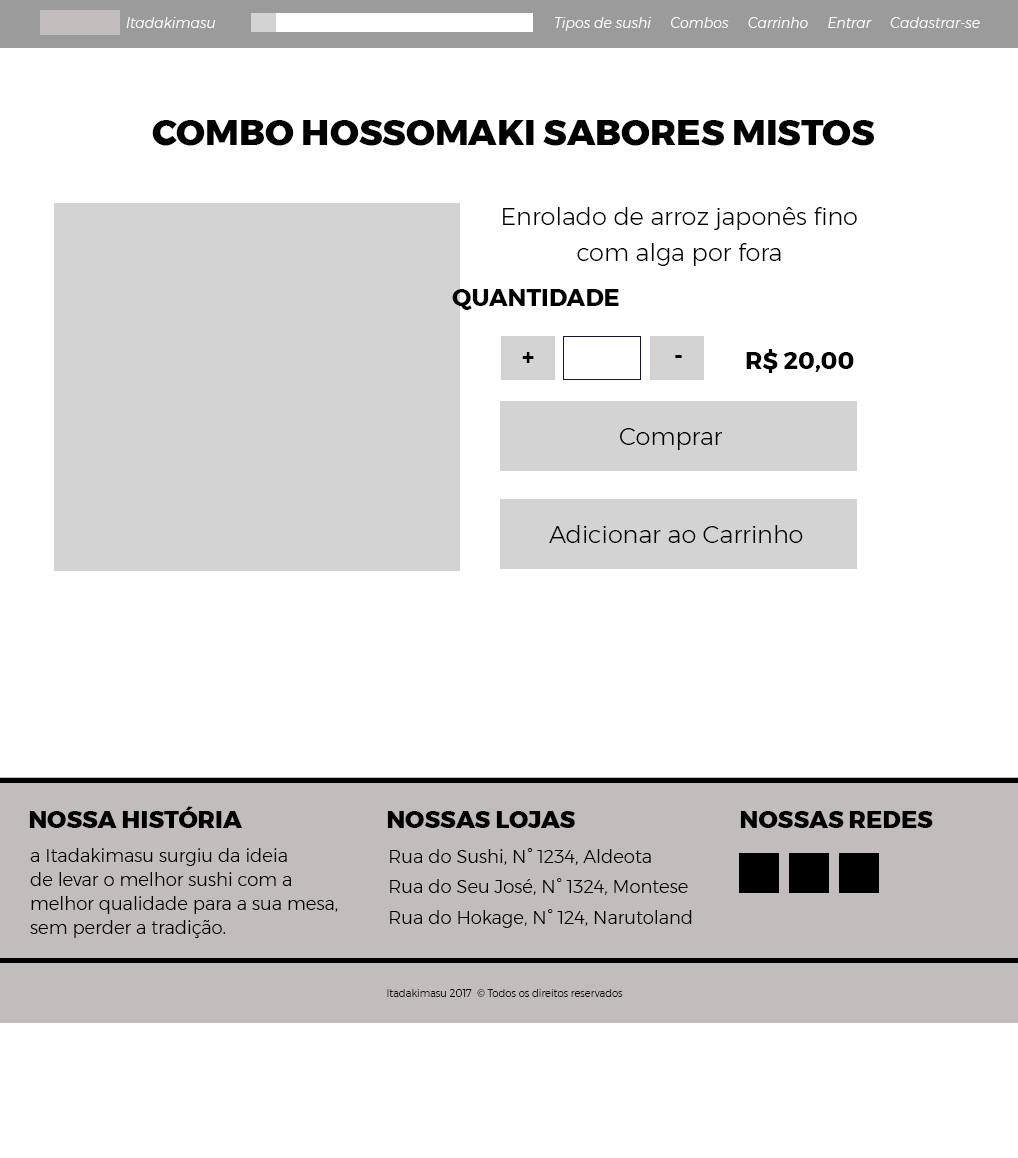
<style>
.page{position:relative;width:1018px;height:1158px;background:#ffffff}
.page>*{position:absolute;margin:0}
.t1{font:14px "Montserrat-LightItalic";color:#fefcfc}
.t2{font:36px "Montserrat-ExtraBold";color:#000000;text-transform:uppercase}
.t3{font:24px/36px "Montserrat-Light";color:#000000}
.t4{font:24px "Montserrat-Bold";color:#000000;text-transform:uppercase}
.t5{font:24px "Montserrat-Light";color:#000000}
.t6{font:24px "Montserrat-ExtraBold";color:#000000;text-transform:uppercase}
.t7{font:18px/24px "Montserrat-Light";color:#000000}
.t8{font:18px "Montserrat-Light";color:#000000}
.t9{font:10px "Montserrat-Light";color:#000000}
</style>
<div class="page">
<p class="t1" style="left:126px;top:17px;width:90px;height:11px">Itadakimasu</p>
<p class="t1" style="left:555px;top:17px;width:425px;height:14px">Tipos de sushi     Combos     Carrinho     Entrar     Cadastrar-se</p>
<p class="t2" style="left:152px;top:120px;width:722px;height:26px">Combo hossomaki sabores mistos</p>
<p class="t3" style="left:503px;top:207px;width:354px;height:59px;text-align:center">Enrolado de arroz japonês fino com alga por fora</p>
<p class="t4" style="left:452px;top:289px;width:167px;height:21px">Quantidade</p>
<p class="t4" style="left:522px;top:352px;width:12px;height:11px">+</p>
<p class="t4" style="left:746px;top:349px;width:108px;height:24px">R$ 20,00</p>
<p class="t4" style="left:675px;top:355px;width:7px;height:3px">-</p>
<p class="t5" style="left:619px;top:428px;width:104px;height:22px">Comprar</p>
<p class="t5" style="left:549px;top:525px;width:254px;height:18px">Adicionar ao Carrinho</p>
<p class="t6" style="left:29px;top:806px;width:214px;height:22px">Nossa história</p>
<p class="t6" style="left:387px;top:811px;width:188px;height:17px">Nossas lojas</p>
<p class="t6" style="left:740px;top:811px;width:193px;height:17px">Nossas Redes</p>
<p class="t7" style="left:30px;top:848px;width:308px;height:90px">a Itadakimasu surgiu da ideia<br>de levar o melhor sushi com a <br>melhor qualidade para a sua mesa,<br>sem perder a tradição.</p>
<p class="t8" style="left:390px;top:848px;width:261px;height:17px">Rua do Sushi, N° 1234, Aldeota</p>
<p class="t8" style="left:390px;top:878px;width:298px;height:17px">Rua do Seu José, N° 1324, Montese</p>
<p class="t8" style="left:390px;top:909px;width:302px;height:19px">Rua do Hokage, N° 124, Narutoland</p>
<p class="t9" style="left:387px;top:989px;width:236px;height:8px">Itadakimasu 2017  © Todos os direitos reservados</p>
</div>
